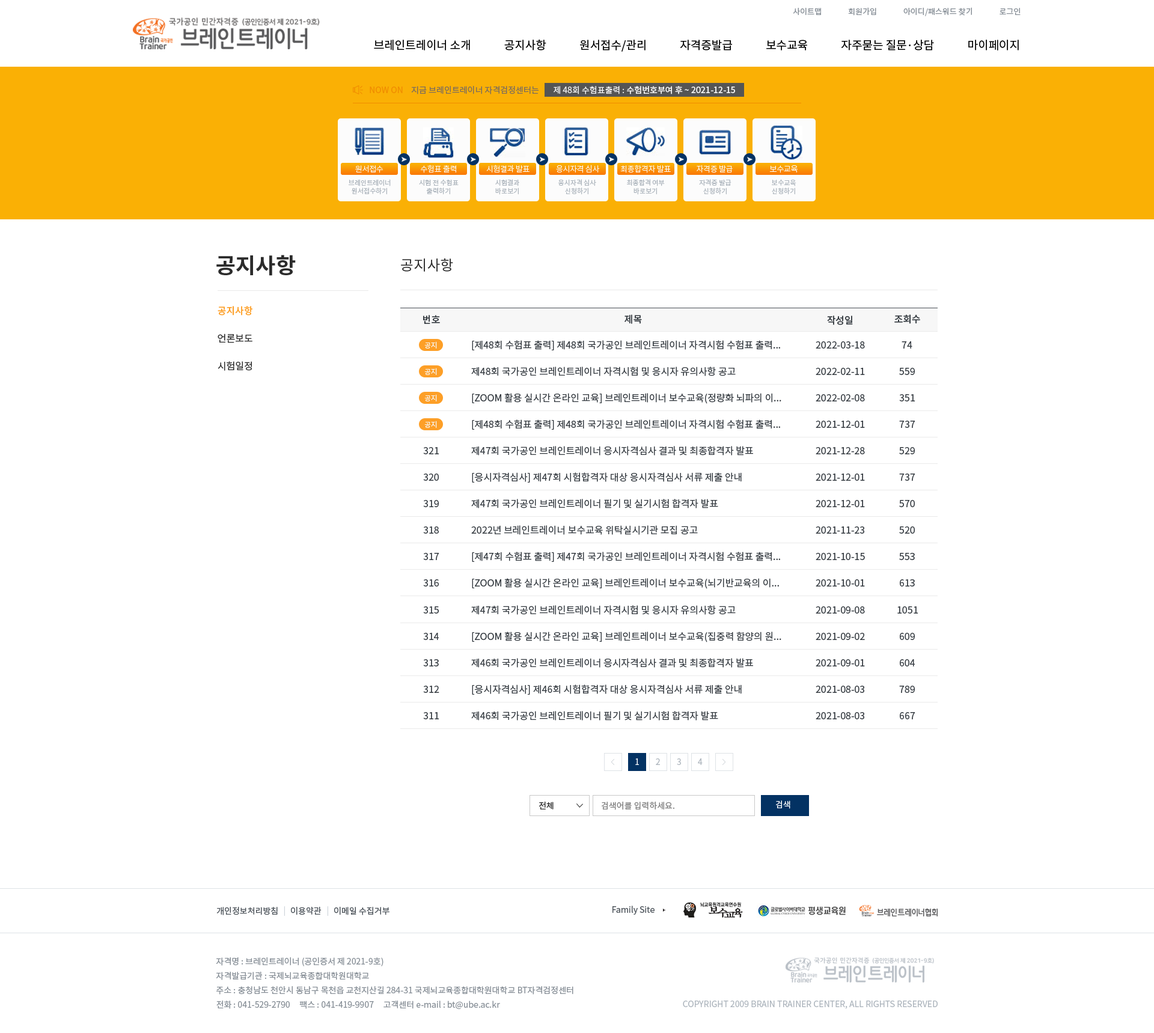
<style>
.page{position:relative;width:1154px;height:1033px;background:#ffffff}
.page>*{position:absolute;margin:0}
.t1{font:7.8px "NotoSansCJKkr-Regular";letter-spacing:0.001em;color:#868e96}
.t2{font:11.4px "NotoSansCJKkr-Regular";color:#000000}
.t3{font:8.4px "NotoSansCJKkr-Regular";color:#f08c00}
.t4{font:8.4px "NotoSansCJKkr-Regular";color:#7c6d5d}
.t5{font:8.4px "NotoSansCJKkr-Medium";color:#f8f8f8}
.t6{font:8.4px "NotoSansCJKkr-Regular";color:#f8f8f8}
.t7{font:7.8px "NotoSansCJKkr-Light";letter-spacing:-0.025em;color:#fcfcfc}
.t8{font:6.6px/8.4px "NotoSansCJKkr-Regular";color:#adb5bd}
.t9{font:21.6px "NotoSansCJKkr-Bold";color:#2b2b2b}
.t10{font:14.4px "NotoSansCJKkr-Regular";color:#2b2b2b}
.t11{font:9.6px "NotoSansCJKkr-Medium";color:#fd9f27}
.t12{font:9.6px "NotoSansCJKkr-Medium";color:#343a40}
.t13{font:9.6px "NotoSansCJKkr-Regular";color:#2b2b2b}
.t14{font:7.2px "NotoSansCJKkr-Regular";color:#f7f7f7}
.t15{font:9.6px "NotoSansCJKkr-Regular";color:#343a40}
.t16{font:8.4px "NotoSansCJKkr-Regular";color:#ffffff}
.t17{font:8.4px "NotoSansCJKkr-Regular";color:#adb5bd}
.t18{font:8.4px "NotoSansCJKkr-Regular";color:#2b2b2b;text-transform:uppercase}
.t19{font:8.4px "NotoSansCJKkr-Regular";color:#7e7e7e;text-transform:uppercase}
.t20{font:8.4px "NotoSansCJKkr-Regular";color:#ffffff;text-transform:uppercase}
.t21{font:8.4px "NotoSansCJKkr-Regular";color:#495057}
.t22{font:8.4px "NotoSansCJKkr-Regular";color:#ced4da}
.t23{font:8.4px/14.4px "NotoSansCJKkr-Regular";color:#868e96}
</style>
<div class="page">
<p class="t1" style="left:793px;top:7px;width:228px;height:9px">사이트맵               회원가입               아이디/패스워드 찾기               로그인</p>
<p class="t2" style="left:374px;top:39px;width:645px;height:13px">브레인트레이너 소개             공지사항             원서접수/관리             자격증발급             보수교육             자주묻는 질문·상담             마이페이지</p>
<p class="t3" style="left:370px;top:87px;width:33px;height:6px">NOW ON</p>
<p class="t4" style="left:411px;top:86px;width:128px;height:8px">지금 브레인트레이너 자격검정센터는</p>
<p class="t5" style="left:554px;top:86px;width:181px;height:8px"><span class="t6">제 48회 수험표출력 : </span>수험번호부여 후 ~ 2021-12-15</p>
<p class="t7" style="left:355px;top:165px;width:28px;height:8px">원서접수</p>
<p class="t7" style="left:421px;top:165px;width:35px;height:8px">수험표 출력</p>
<p class="t7" style="left:486px;top:165px;width:44px;height:8px">시험결과 발표</p>
<p class="t7" style="left:556px;top:165px;width:44px;height:8px">응시자격 심사</p>
<p class="t7" style="left:620px;top:165px;width:51px;height:8px">최종합격자 발표</p>
<p class="t7" style="left:697px;top:165px;width:36px;height:8px">자격증 발급</p>
<p class="t7" style="left:769px;top:165px;width:29px;height:8px">보수교육</p>
<p class="t8" style="left:349px;top:179px;width:42px;height:16px;text-align:center">브레인트레이너<br>원서접수하기</p>
<p class="t8" style="left:419px;top:179px;width:40px;height:16px;text-align:center">시험 전 수험표<br>출력하기</p>
<p class="t8" style="left:495px;top:179px;width:24px;height:16px;text-align:center">시험결과<br>바로보기</p>
<p class="t8" style="left:558px;top:179px;width:38px;height:16px;text-align:center">응시자격 심사<br>신청하기</p>
<p class="t8" style="left:627px;top:179px;width:38px;height:16px;text-align:center">최종합격 여부<br>바로보기</p>
<p class="t8" style="left:699px;top:179px;width:33px;height:16px;text-align:center">자격증 발급<br>신청하기</p>
<p class="t8" style="left:772px;top:179px;width:24px;height:16px;text-align:center">보수교육<br>신청하기</p>
<p class="t9" style="left:216px;top:255px;width:80px;height:21px">공지사항</p>
<p class="t10" style="left:401px;top:258px;width:52px;height:14px">공지사항</p>
<p class="t11" style="left:218px;top:306px;width:34px;height:10px">공지사항</p>
<p class="t12" style="left:423px;top:315px;width:17px;height:9px">번호</p>
<p class="t12" style="left:625px;top:314px;width:17px;height:10px">제목</p>
<p class="t12" style="left:827px;top:316px;width:26px;height:9px">작성일</p>
<p class="t12" style="left:894px;top:314px;width:26px;height:10px">조회수</p>
<p class="t13" style="left:218px;top:334px;width:34px;height:9px">언론보도</p>
<p class="t14" style="left:424px;top:341px;width:13px;height:8px">공지</p>
<p class="t15" style="left:472px;top:340px;width:308px;height:10px">[제48회 수험표 출력] 제48회 국가공인 브레인트레이너 자격시험 수험표 출력...</p>
<p class="t15" style="left:816px;top:341px;width:49px;height:8px">2022-03-18</p>
<p class="t15" style="left:902px;top:341px;width:10px;height:8px">74</p>
<p class="t13" style="left:218px;top:361px;width:34px;height:10px">시험일정</p>
<p class="t14" style="left:424px;top:368px;width:13px;height:7px">공지</p>
<p class="t15" style="left:471px;top:367px;width:265px;height:9px">제48회 국가공인 브레인트레이너 자격시험 및 응시자 유의사항 공고</p>
<p class="t15" style="left:816px;top:368px;width:49px;height:7px">2022-02-11</p>
<p class="t15" style="left:899px;top:368px;width:16px;height:7px">559</p>
<p class="t14" style="left:424px;top:394px;width:13px;height:8px">공지</p>
<p class="t15" style="left:472px;top:393px;width:309px;height:11px">[ZOOM 활용 실시간 온라인 교육] 브레인트레이너 보수교육(정량화 뇌파의 이...</p>
<p class="t15" style="left:816px;top:394px;width:49px;height:8px">2022-02-08</p>
<p class="t15" style="left:899px;top:394px;width:16px;height:8px">351</p>
<p class="t14" style="left:424px;top:421px;width:13px;height:7px">공지</p>
<p class="t15" style="left:472px;top:420px;width:308px;height:10px">[제48회 수험표 출력] 제48회 국가공인 브레인트레이너 자격시험 수험표 출력...</p>
<p class="t15" style="left:816px;top:421px;width:49px;height:7px">2021-12-01</p>
<p class="t15" style="left:899px;top:421px;width:16px;height:7px">737</p>
<p class="t15" style="left:423px;top:447px;width:16px;height:7px">321</p>
<p class="t15" style="left:471px;top:446px;width:282px;height:10px">제47회 국가공인 브레인트레이너 응시자격심사 결과 및 최종합격자 발표</p>
<p class="t15" style="left:816px;top:447px;width:49px;height:7px">2021-12-28</p>
<p class="t15" style="left:899px;top:447px;width:16px;height:7px">529</p>
<p class="t15" style="left:423px;top:474px;width:16px;height:7px">320</p>
<p class="t15" style="left:472px;top:472px;width:270px;height:11px">[응시자격심사] 제47회 시험합격자 대상 응시자격심사 서류 제출 안내</p>
<p class="t15" style="left:816px;top:474px;width:49px;height:7px">2021-12-01</p>
<p class="t15" style="left:899px;top:474px;width:16px;height:7px">737</p>
<p class="t15" style="left:423px;top:500px;width:16px;height:7px">319</p>
<p class="t15" style="left:471px;top:499px;width:247px;height:10px">제47회 국가공인 브레인트레이너 필기 및 실기시험 합격자 발표</p>
<p class="t15" style="left:816px;top:500px;width:49px;height:7px">2021-12-01</p>
<p class="t15" style="left:899px;top:500px;width:16px;height:7px">570</p>
<p class="t15" style="left:423px;top:527px;width:16px;height:7px">318</p>
<p class="t15" style="left:471px;top:525px;width:227px;height:10px">2022년 브레인트레이너 보수교육 위탁실시기관 모집 공고</p>
<p class="t15" style="left:816px;top:527px;width:48px;height:7px">2021-11-23</p>
<p class="t15" style="left:899px;top:527px;width:16px;height:7px">520</p>
<p class="t15" style="left:423px;top:553px;width:16px;height:7px">317</p>
<p class="t15" style="left:472px;top:552px;width:308px;height:10px">[제47회 수험표 출력] 제47회 국가공인 브레인트레이너 자격시험 수험표 출력...</p>
<p class="t15" style="left:816px;top:553px;width:49px;height:7px">2021-10-15</p>
<p class="t15" style="left:899px;top:553px;width:16px;height:7px">553</p>
<p class="t15" style="left:423px;top:579px;width:16px;height:8px">316</p>
<p class="t15" style="left:472px;top:578px;width:307px;height:11px">[ZOOM 활용 실시간 온라인 교육] 브레인트레이너 보수교육(뇌기반교육의 이...</p>
<p class="t15" style="left:816px;top:579px;width:49px;height:8px">2021-10-01</p>
<p class="t15" style="left:900px;top:579px;width:15px;height:8px">613</p>
<p class="t15" style="left:471px;top:605px;width:265px;height:10px">제47회 국가공인 브레인트레이너 자격시험 및 응시자 유의사항 공고</p>
<p class="t15" style="left:423px;top:606px;width:16px;height:8px">315</p>
<p class="t15" style="left:816px;top:606px;width:49px;height:8px">2021-09-08</p>
<p class="t15" style="left:897px;top:606px;width:21px;height:8px">1051</p>
<p class="t15" style="left:423px;top:633px;width:16px;height:7px">314</p>
<p class="t15" style="left:472px;top:632px;width:309px;height:11px">[ZOOM 활용 실시간 온라인 교육] 브레인트레이너 보수교육(집중력 함양의 원...</p>
<p class="t15" style="left:816px;top:633px;width:49px;height:7px">2021-09-02</p>
<p class="t15" style="left:900px;top:633px;width:15px;height:7px">609</p>
<p class="t15" style="left:423px;top:659px;width:16px;height:8px">313</p>
<p class="t15" style="left:471px;top:658px;width:282px;height:10px">제46회 국가공인 브레인트레이너 응시자격심사 결과 및 최종합격자 발표</p>
<p class="t15" style="left:816px;top:659px;width:49px;height:8px">2021-09-01</p>
<p class="t15" style="left:900px;top:659px;width:15px;height:8px">604</p>
<p class="t15" style="left:423px;top:686px;width:16px;height:7px">312</p>
<p class="t15" style="left:472px;top:685px;width:270px;height:10px">[응시자격심사] 제46회 시험합격자 대상 응시자격심사 서류 제출 안내</p>
<p class="t15" style="left:816px;top:686px;width:48px;height:7px">2021-08-03</p>
<p class="t15" style="left:899px;top:686px;width:16px;height:7px">789</p>
<p class="t15" style="left:423px;top:712px;width:16px;height:7px">311</p>
<p class="t15" style="left:471px;top:711px;width:247px;height:10px">제46회 국가공인 브레인트레이너 필기 및 실기시험 합격자 발표</p>
<p class="t15" style="left:816px;top:712px;width:48px;height:7px">2021-08-03</p>
<p class="t15" style="left:900px;top:712px;width:15px;height:7px">667</p>
<p class="t16" style="left:635px;top:759px;width:4px;height:6px">1</p>
<p class="t17" style="left:656px;top:759px;width:4px;height:6px">2</p>
<p class="t17" style="left:677px;top:759px;width:4px;height:6px">3</p>
<p class="t17" style="left:698px;top:759px;width:5px;height:6px">4</p>
<p class="t18" style="left:539px;top:802px;width:15px;height:8px">전체</p>
<p class="t19" style="left:602px;top:802px;width:72px;height:8px">검색어를 입력하세요.</p>
<p class="t20" style="left:776px;top:801px;width:14px;height:8px">검색</p>
<p class="t21" style="left:612px;top:906px;width:43px;height:9px">Family Site</p>
<p class="t21" style="left:216px;top:907px;width:62px;height:8px">개인정보처리방침</p>
<p class="t22" style="left:284px;top:906px;width:1px;height:10px">|</p>
<p class="t21" style="left:291px;top:907px;width:31px;height:8px">이용약관</p>
<p class="t22" style="left:327px;top:906px;width:1px;height:10px">|</p>
<p class="t21" style="left:334px;top:907px;width:55px;height:8px">이메일 수집거부</p>
<p class="t23" style="left:216px;top:958px;width:357px;height:52px">자격명 : 브레인트레이너 (공인증서 제 2021-9호)<br>자격발급기관 : 국제뇌교육종합대학원대학교<br>주소 : 충청남도 천안시 동남구 목천읍 교천지산길 284-31 국제뇌교육종합대학원대학교 BT자격검정센터<br>전화 : 041-529-2790     팩스 : 041-419-9907     고객센터 e-mail : bt@ube.ac.kr</p>
<p class="t17" style="left:683px;top:1001px;width:255px;height:8px">COPYRIGHT 2009 BRAIN TRAINER CENTER, ALL RIGHTS RESERVED</p>
</div>
